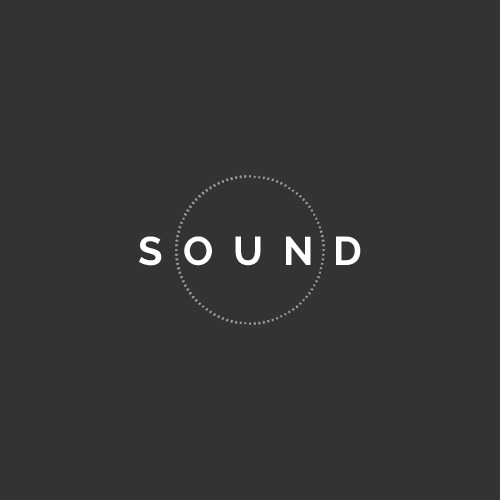
<style>
.page{position:relative;width:500px;height:500px;background:#333333}
.page>*{position:absolute;margin:0}
.t1{font:40px "Raleway-Bold";letter-spacing:0.5em;color:#ffffff;text-transform:uppercase}
.t2{font:40px "Raleway-Bold";color:#ffffff;text-transform:uppercase}
</style>
<div class="page">
<p class="t1" style="left:139px;top:236px;width:222px;height:30px">soun<span class="t2">d</span></p>
</div>
